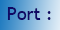
<style>
.page{position:relative;width:60px;height:30px}
.page>*{position:absolute;margin:0}
.t1{font:18px "TrebuchetMS";color:#100964}
</style>
<div class="page">
<p class="t1" style="left:7px;top:7px;width:44px;height:13px">Port :</p>
</div>
